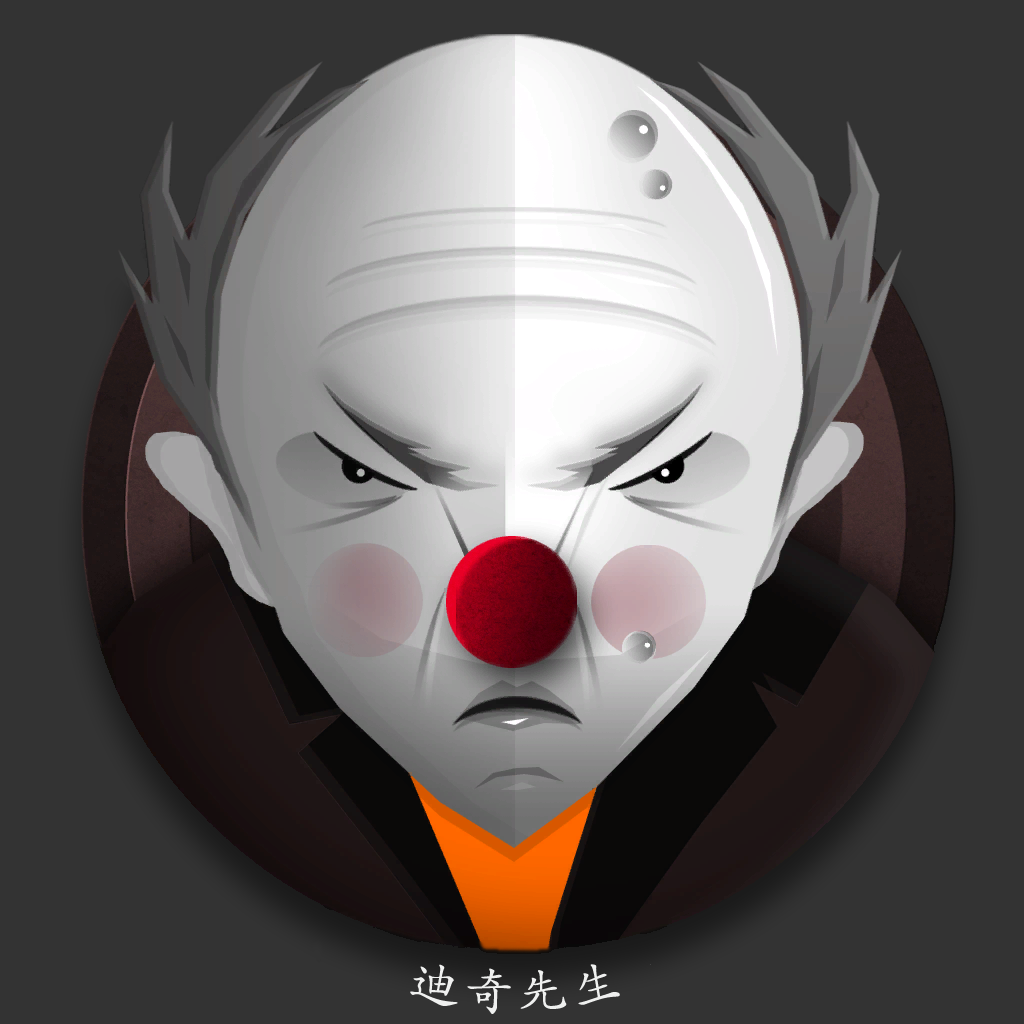
<style>
.page{position:relative;width:1024px;height:1024px;background:#333333}
.page>*{position:absolute;margin:0}
.t1{font:48px "STKaiti";letter-spacing:0.05em;color:#eff0ef}
</style>
<div class="page">
<p class="t1" style="left:410px;top:964px;width:210px;height:50px">迪奇先生</p>
</div>
